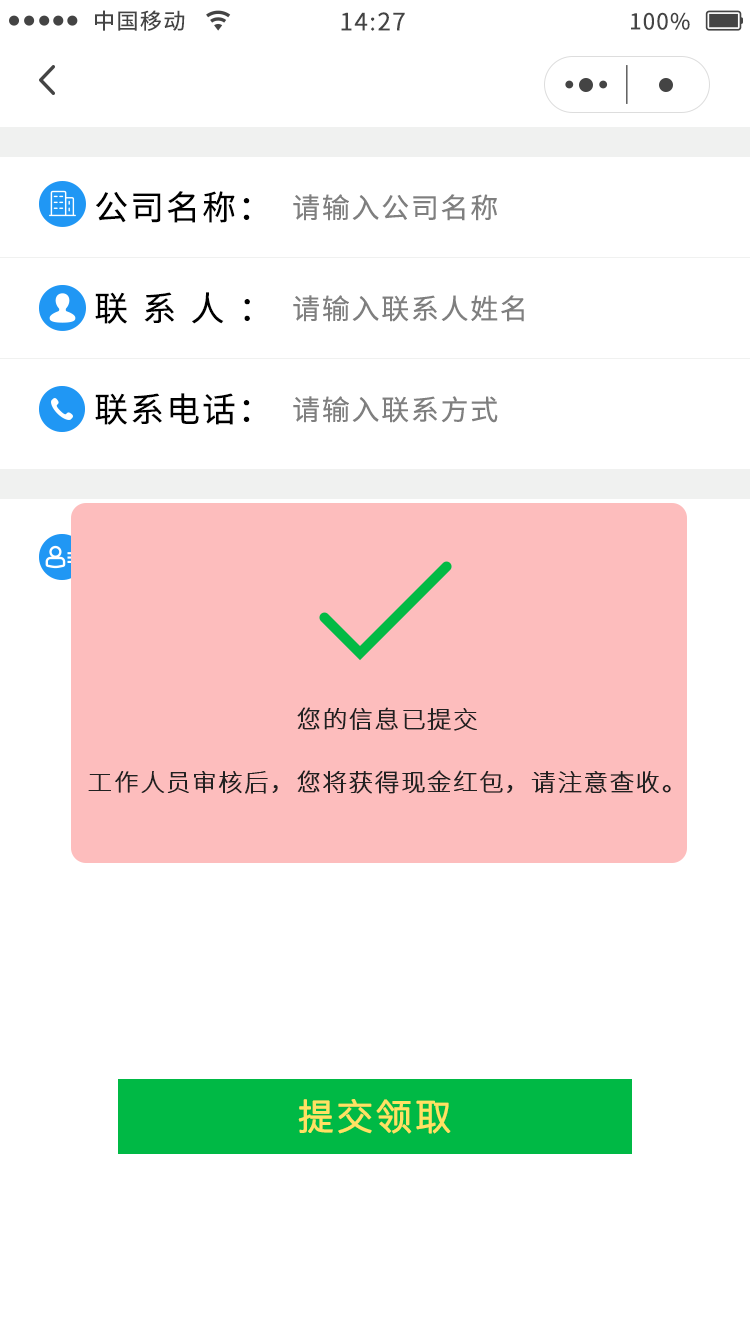
<style>
.page{position:relative;width:750px;height:1334px;background:#ffffff}
.page>*{position:absolute;margin:0}
.t1{font:22px "NotoSansCJKsc-Regular";letter-spacing:0.06em;color:#444444}
.t2{font:24px "NotoSansCJKsc-Regular";letter-spacing:0.06em;color:#444444}
.t3{font:34px "NotoSansCJKsc-Regular";letter-spacing:0.06em;color:#000000}
.t4{font:28px "NotoSansCJKsc-Regular";letter-spacing:0.06em;color:#7f7f7f}
.t5{font:34px "NotoSansCJKsc-Regular";letter-spacing:0.42em;color:#000000}
.t6{font:34px "NotoSansCJKsc-Regular";letter-spacing:0.48em;color:#000000}
.t7{font:24px/63px "SourceHanSansSC-ExtraLight";letter-spacing:0.06em;color:#212121;font-weight:bold}
.t8{font:36px "PingFang-SC-Regular";letter-spacing:0.06em;color:#ffe163;font-weight:bold}
</style>
<div class="page">
<p class="t1" style="left:95px;top:10px;width:90px;height:21px">中国移动</p>
<p class="t2" style="left:341px;top:12px;width:64px;height:19px">14:27</p>
<p class="t1" style="left:631px;top:12px;width:59px;height:18px">100%</p>
<p class="t3" style="left:96px;top:191px;width:154px;height:32px">公司名称：</p>
<p class="t4" style="left:293px;top:194px;width:204px;height:27px">请输入公司名称</p>
<p class="t5" style="left:95px;top:292px;width:155px;height:32px">联系人<span class="t6">：</span></p>
<p class="t4" style="left:293px;top:295px;width:231px;height:27px">请输入联系人姓名</p>
<p class="t3" style="left:95px;top:393px;width:155px;height:32px">联系电话：</p>
<p class="t4" style="left:293px;top:396px;width:205px;height:27px">请输入联系方式</p>
<p class="t7" style="left:88px;top:707px;width:583px;height:87px;text-align:center">您的信息已提交<br>工作人员审核后，您将获得现金红包，请注意查收。</p>
<p class="t8" style="left:298px;top:1099px;width:153px;height:35px">提交领取</p>
</div>
